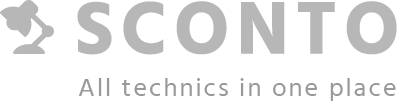
<style>
.page{position:relative;width:398px;height:102px;background:#ffffff}
.page>*{position:absolute;margin:0}
.t1{font:76px "Hind-Bold";letter-spacing:0.068em;color:#b7b7b7;text-transform:uppercase;font-weight:bold}
.t2{font:26px "Hind-Regular";letter-spacing:0.08em;color:#999999}
</style>
<div class="page">
<p class="t1" style="left:77px;top:1px;width:320px;height:54px">Sconto</p>
<p class="t2" style="left:78px;top:78px;width:318px;height:23px">All technics in one place</p>
</div>
